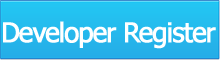
<style>
.page{position:relative;width:220px;height:60px}
.page>*{position:absolute;margin:0}
.t1{font:27px "Tahoma";letter-spacing:-0.05em;color:#ffffff;font-weight:bold}
</style>
<div class="page">
<p class="t1" style="left:3px;top:21px;width:213px;height:28px">Developer Register</p>
</div>
